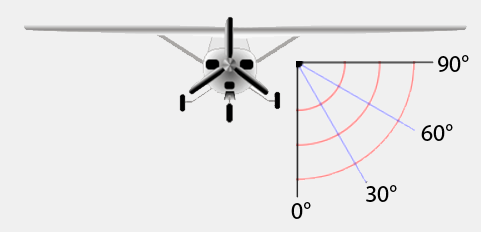
<style>
.page{position:relative;width:481px;height:232px;background:#f0f0f0}
.page>*{position:absolute;margin:0}
.t1{font:24px "MyriadPro-Regular";color:#000000}
</style>
<div class="page">
<p class="t1" style="left:438px;top:55px;width:31px;height:17px">90°</p>
<p class="t1" style="left:421px;top:124px;width:32px;height:17px">60°</p>
<p class="t1" style="left:366px;top:185px;width:31px;height:17px">30°</p>
<p class="t1" style="left:291px;top:202px;width:20px;height:17px">0°</p>
</div>
